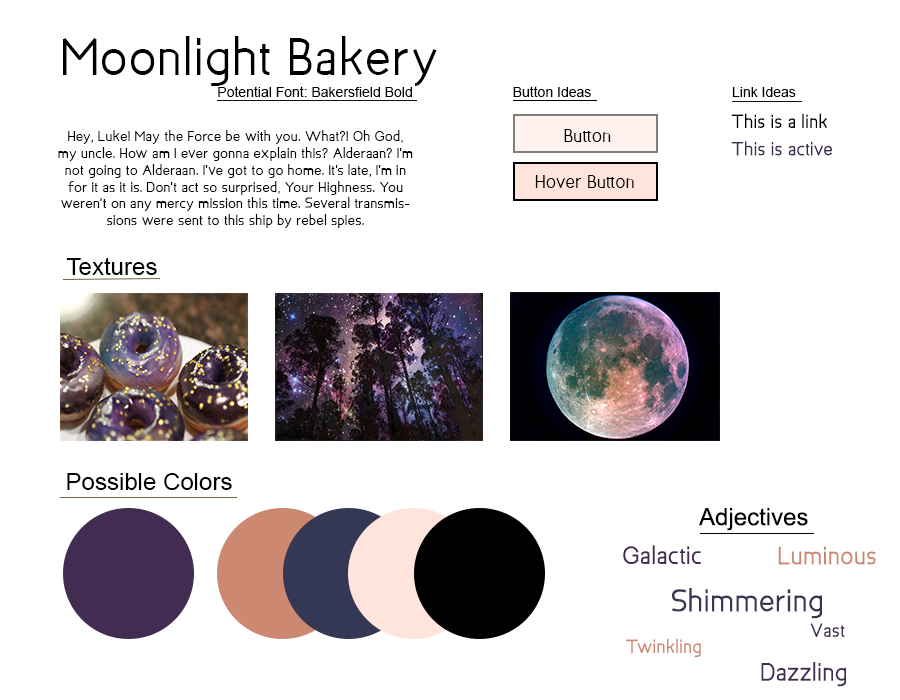
<style>
.page{position:relative;width:900px;height:700px;background:#ffffff}
.page>*{position:absolute;margin:0}
.t1{font:50px "Bakersfield-Bold";color:#000000}
.t2{font:14px "ArialMT";color:#000000}
.t3{font:18px "Bakersfield-Bold";color:#000003}
.t4{font:14px "Bakersfield-Bold";color:#000000}
.t5{font:18px "Bakersfield-Bold";color:#000000}
.t6{font:18px "Bakersfield-Bold";color:#422c51}
.t7{font:24px "ArialMT";color:#000000}
.t8{font:24px "ArialMT";color:#020004}
.t9{font:24px "Bakersfield-Bold";color:#422c51}
.t10{font:24px "Bakersfield-Bold";color:#cc8870}
.t11{font:30px "Bakersfield-Bold";color:#353854}
.t12{font:18px "Bakersfield-Bold";color:#cc8870}
</style>
<div class="page">
<p class="t1" style="left:63px;top:36px;width:374px;height:50px">Moonlight Bakery</p>
<p class="t2" style="left:218px;top:86px;width:194px;height:11px">Potential Font: Bakersfield Bold</p>
<p class="t2" style="left:513px;top:86px;width:78px;height:11px">Button Ideas</p>
<p class="t2" style="left:732px;top:87px;width:64px;height:10px">Link Ideas</p>
<p class="t3" style="left:731px;top:113px;width:97px;height:15px">This is a link</p>
<p class="t4" style="left:58px;top:130px;width:355px;height:98px;text-align:center">Hey, Luke! May the Force be with you. What?! Oh God, my uncle. How am I ever gonna explain this? Alderaan? I'm not going to Alderaan. I've got to go home. It's late, I'm in for it as it is. Don't act so surprised, Your Highness. You weren't on any mercy mission this time. Several transmissions were sent to this ship by rebel spies.</p>
<p class="t5" style="left:564px;top:129px;width:47px;height:13px">Button</p>
<p class="t6" style="left:731px;top:141px;width:102px;height:15px">This is active</p>
<p class="t5" style="left:535px;top:175px;width:99px;height:13px">Hover Button</p>
<p class="t7" style="left:66px;top:257px;width:91px;height:18px">Textures</p>
<p class="t7" style="left:67px;top:473px;width:165px;height:17px">Possible Colors</p>
<p class="t8" style="left:699px;top:508px;width:109px;height:23px">Adjectives</p>
<p class="t9" style="left:623px;top:545px;width:78px;height:19px">Galactic</p>
<p class="t10" style="left:778px;top:546px;width:98px;height:19px">Luminous</p>
<p class="t11" style="left:672px;top:588px;width:150px;height:31px">Shimmering</p>
<p class="t6" style="left:810px;top:623px;width:35px;height:14px">Vast</p>
<p class="t12" style="left:626px;top:638px;width:75px;height:19px">Twinkling</p>
<p class="t9" style="left:761px;top:662px;width:85px;height:25px">Dazzling</p>
</div>
